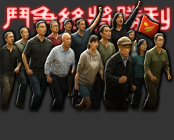
<style>
.page{position:relative;width:174px;height:140px;background:#333333}
.page>*{position:absolute;margin:0}
.t1{font:31.2px "FZZJ-MSHLFW";letter-spacing:-0.1em}
</style>
<div class="page">
<p class="t1" style="left:2px;top:5px;width:168px;height:27px">斗争终将胜利</p>
</div>
